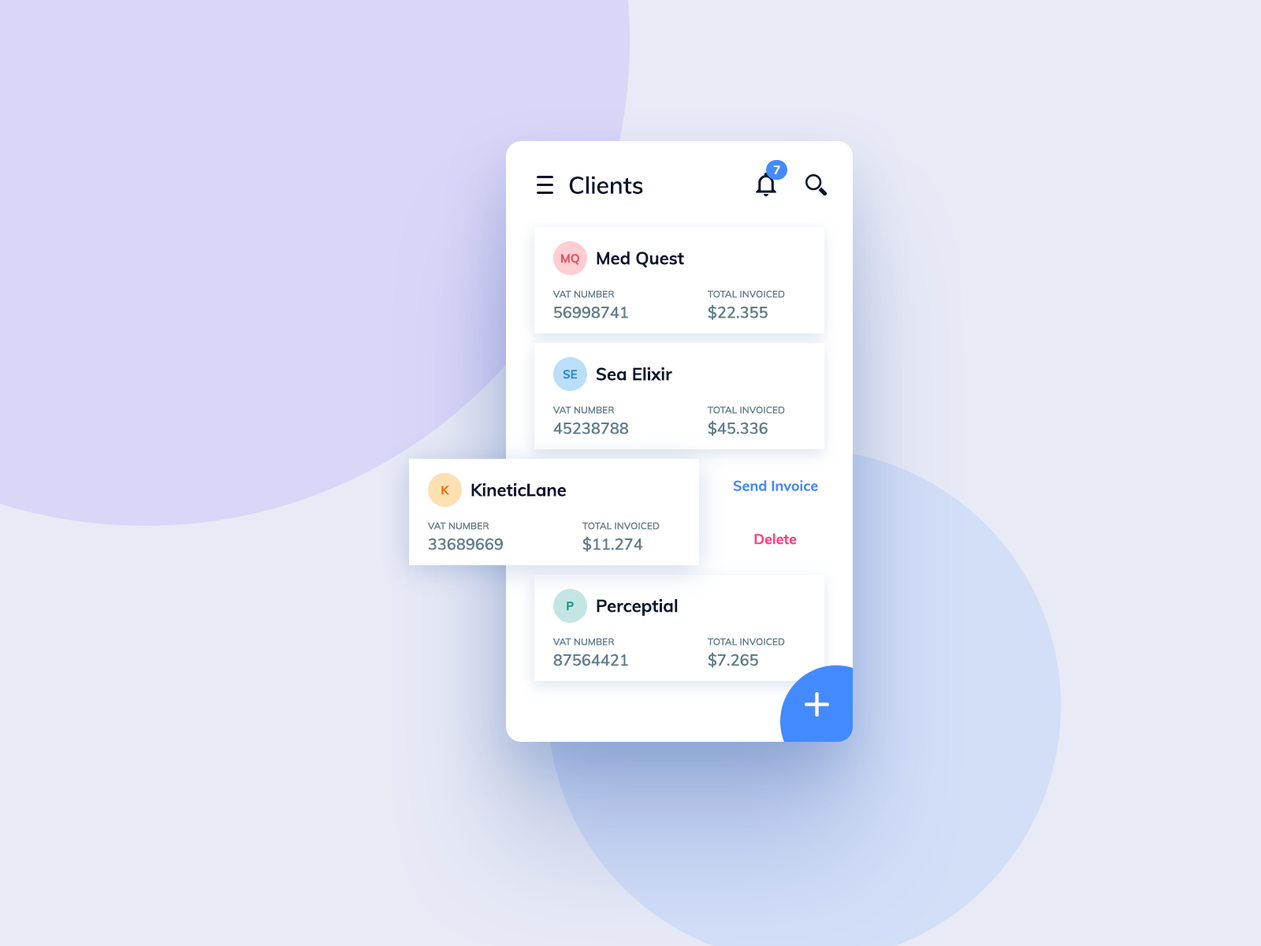
<style>
.page{position:relative;width:1261px;height:946px;background:#e8eaf6}
.page>*{position:absolute;margin:0}
.t1{font:11.8px "Muli-Bold";color:#ffffff}
.t2{font:23.6px "Muli-SemiBold";color:#0c152e}
.t3{font:11.8px "Muli-Bold";color:#e05361}
.t4{font:17.3px "Muli-Bold";color:#0c152e}
.t5{font:9.5px "Muli-SemiBold";color:#607d8b;text-transform:uppercase}
.t6{font:15.8px "Muli-SemiBold";color:#607d8b;text-transform:uppercase}
.t7{font:11.8px "Muli-Bold";color:#1e88e5}
.t8{font:11.8px "Muli-Bold";color:#ef6c00}
.t9{font:14.2px "Muli-Bold";color:#448aff}
.t10{font:14.2px "Muli-Bold";color:#ff4081}
.t11{font:11.8px "Muli-Bold";color:#08988a}
</style>
<div class="page">
<p class="t1" style="left:773px;top:165px;width:7px;height:9px">7</p>
<p class="t2" style="left:569px;top:176px;width:74px;height:18px">Clients</p>
<p class="t3" style="left:561px;top:254px;width:18px;height:11px">MQ</p>
<p class="t4" style="left:597px;top:251px;width:87px;height:17px">Med Quest</p>
<p class="t5" style="left:552px;top:290px;width:63px;height:8px">VAT Number</p>
<p class="t5" style="left:707px;top:290px;width:78px;height:8px">total invoiced</p>
<p class="t6" style="left:554px;top:306px;width:74px;height:12px">56998741</p>
<p class="t6" style="left:708px;top:304px;width:60px;height:16px">$22.355</p>
<p class="t7" style="left:563px;top:370px;width:14px;height:9px">SE</p>
<p class="t4" style="left:596px;top:367px;width:76px;height:14px">Sea Elixir</p>
<p class="t5" style="left:552px;top:406px;width:63px;height:8px">VAT Number</p>
<p class="t5" style="left:707px;top:406px;width:78px;height:8px">total invoiced</p>
<p class="t6" style="left:553px;top:422px;width:76px;height:12px">45238788</p>
<p class="t6" style="left:708px;top:420px;width:60px;height:16px">$45.336</p>
<p class="t8" style="left:441px;top:485px;width:8px;height:10px">K</p>
<p class="t4" style="left:471px;top:483px;width:95px;height:13px">KineticLane</p>
<p class="t9" style="left:733px;top:480px;width:85px;height:11px">Send Invoice</p>
<p class="t5" style="left:427px;top:522px;width:62px;height:8px">VAT Number</p>
<p class="t5" style="left:582px;top:522px;width:78px;height:8px">total invoiced</p>
<p class="t10" style="left:754px;top:533px;width:43px;height:12px">Delete</p>
<p class="t6" style="left:428px;top:537px;width:75px;height:13px">33689669</p>
<p class="t6" style="left:582px;top:536px;width:61px;height:16px">$11.274</p>
<p class="t11" style="left:567px;top:601px;width:7px;height:10px">P</p>
<p class="t4" style="left:597px;top:599px;width:81px;height:17px">Perceptial</p>
<p class="t5" style="left:552px;top:638px;width:63px;height:7px">VAT Number</p>
<p class="t5" style="left:707px;top:638px;width:78px;height:7px">total invoiced</p>
<p class="t6" style="left:553px;top:653px;width:75px;height:13px">87564421</p>
<p class="t6" style="left:708px;top:652px;width:50px;height:15px">$7.265</p>
</div>
